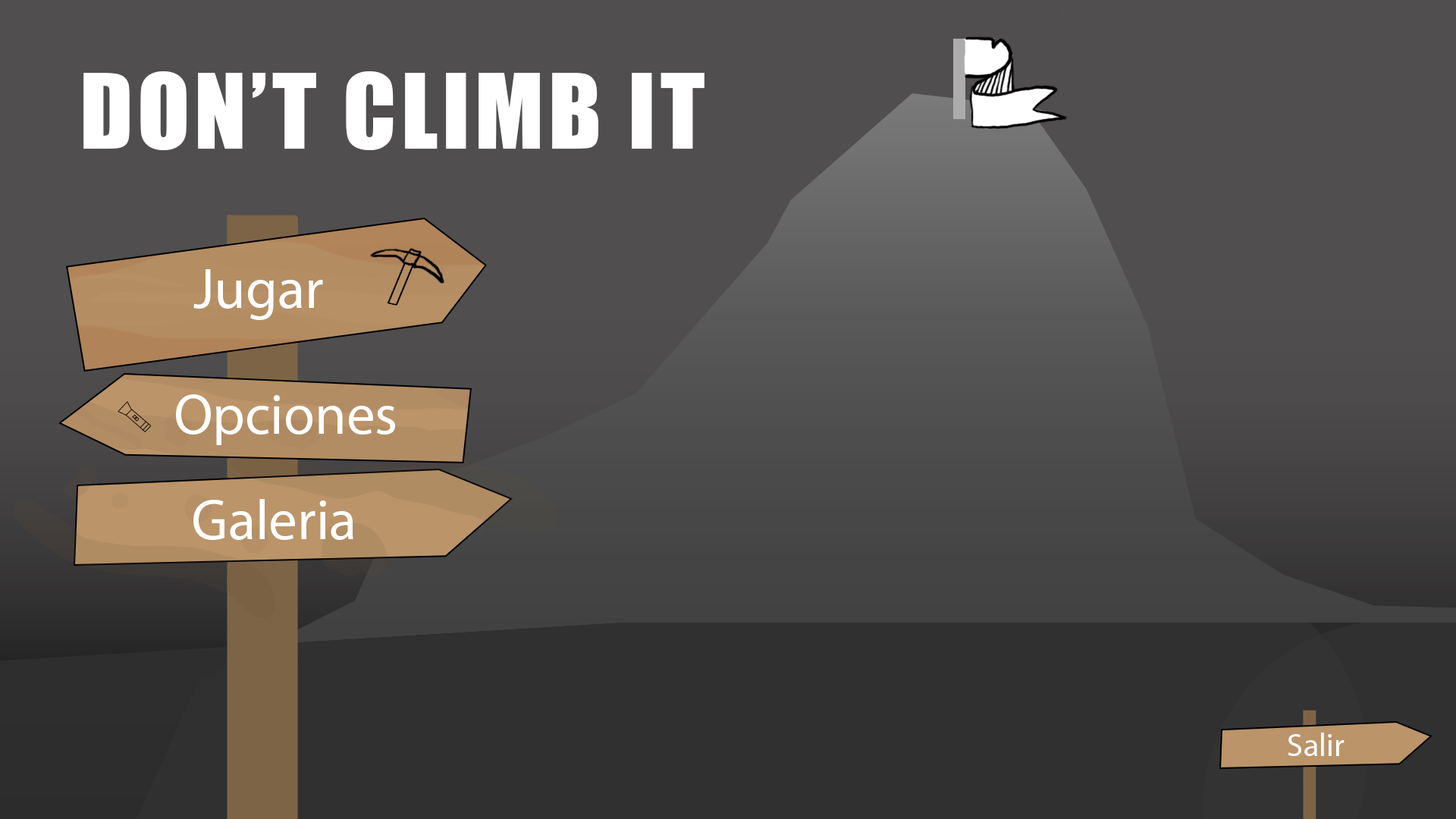
<style>
.page{position:relative;width:1456px;height:819px;background:#504e4e}
.page>*{position:absolute;margin:0}
.t1{font:96px "Impact";letter-spacing:0.05em;color:#ffffff}
.t2{font:56.9px "MyriadPro-Regular";color:#ffffff}
.t3{font:32.2px "MyriadPro-Regular";color:#ffffff}
</style>
<div class="page">
<p class="t1" style="left:83px;top:71px;width:621px;height:79px">DON’T CLIMB IT</p>
<p class="t2" style="left:193px;top:269px;width:130px;height:51px">Jugar</p>
<p class="t2" style="left:176px;top:394px;width:219px;height:51px">Opciones</p>
<p class="t2" style="left:193px;top:499px;width:160px;height:41px">Galeria</p>
<p class="t3" style="left:1288px;top:733px;width:57px;height:23px">Salir</p>
</div>
